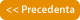
<style>
.page{position:relative;width:80px;height:20px;background:#e68d00}
.page>*{position:absolute;margin:0}
.t1{font:11px "MyriadPro-Semibold";color:#ffffff}
</style>
<div class="page">
<p class="t1" style="left:6px;top:5px;width:69px;height:8px">&lt;&lt; Precedenta</p>
</div>
